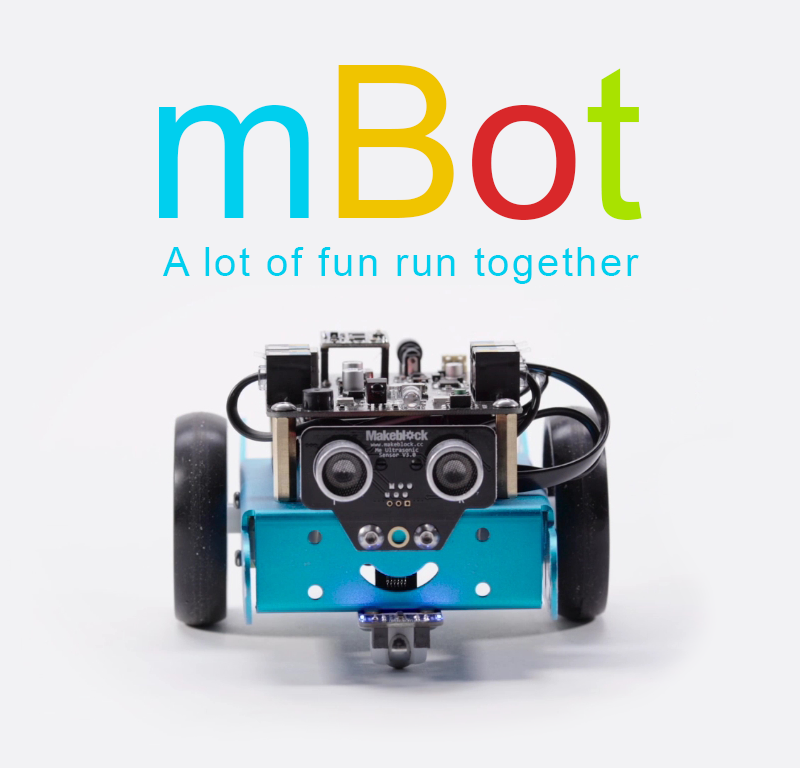
<style>
.page{position:relative;width:800px;height:768px;background:#f2f2f4}
.page>*{position:absolute;margin:0}
.t1{font:213.3px "ArialMT";color:#00cfee}
.t2{font:213.3px "ArialMT";color:#f0c400}
.t3{font:213.3px "ArialMT";color:#d9282a}
.t4{font:213.3px "ArialMT";color:#a9e200}
.t5{font:40px "ArialMT";letter-spacing:0.062em;color:#00cfee}
</style>
<div class="page">
<p class="t1" style="left:159px;top:65px;width:483px;height:155px">m<span class="t2">B</span><span class="t3">o</span><span class="t4">t</span></p>
<p class="t5" style="left:163px;top:247px;width:476px;height:37px">A lot of fun run together</p>
</div>
